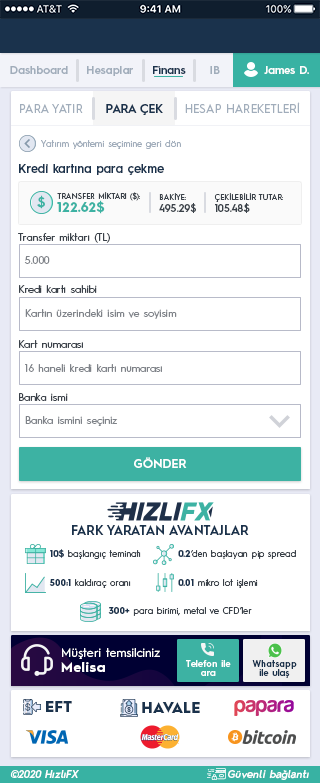
<style>
.page{position:relative;width:320px;height:783px;background:#ffffff}
.page>*{position:absolute;margin:0}
.t1{font:11.1px "HurmeGeometricSans3-SemiBold";color:#a1adbb}
.t2{font:11.1px "HurmeGeometricSans3-SemiBold";color:#1a324c}
.t3{font:11.1px "HurmeGeometricSans3-SemiBold";color:#fefefe}
.t4{font:11.9px "HurmeGeometricSans1-Regular";color:#a1adbb}
.t5{font:11.9px "HurmeGeometricSans1-SemiBold";color:#1a324c}
.t6{font:9px "HurmeGeometricSans1-Regular";letter-spacing:0.01em;color:#a1adbb}
.t7{font:11.9px "HurmeGeometricSans3-SemiBold";letter-spacing:0.01em;color:#1a324c}
.t8{font:13.4px "HurmeGeometricSans2-SemiBold";letter-spacing:0.01em;color:#3db2a3}
.t9{font:7.7px "HurmeGeometricSans1-Regular";letter-spacing:0.01em;color:#3a4149}
.t10{font:10.2px "HurmeGeometricSans1-SemiBold";letter-spacing:0.01em;color:#3a4149}
.t11{font:13.7px "HurmeGeometricSans1-Bold";letter-spacing:0.01em;color:#3db2a3}
.t12{font:10.2px "HurmeGeometricSans1-Regular";letter-spacing:0.01em;color:#3a4149}
.t13{font:10.2px "HurmeGeometricSans1-Regular";letter-spacing:0.01em;color:#7f8389}
.t14{font:11.9px "HurmeGeometricSans1-SemiBold";letter-spacing:0.025em;color:#ffffff}
.t15{font:12.8px "HurmeGeometricSans1-SemiBold";color:#1a324c}
.t16{font:9px "HurmeGeometricSans1-Regular";color:#3a4149}
.t17{font:9px "HurmeGeometricSans1-Bold";color:#1a324c}
.t18{font:11.9px/15.4px "HurmeGeometricSans1-Regular";letter-spacing:0.025em;color:#ffffff}
.t19{font:13.7px/15.4px "HurmeGeometricSans1-Bold";letter-spacing:0.05em;color:#ffffff}
.t20{font:8.9px/8.9px "HurmeGeometricSans3-SemiBold";letter-spacing:0.01em;color:#ffffff}
.t21{font:8.9px/8.9px "HurmeGeometricSans3-SemiBold";letter-spacing:0.01em;color:#1a324c}
.t22{font:14.5px "HurmeGeometricSans1-Black";letter-spacing:0.025em;color:#1a324c}
.t23{font:10.2px "HurmeGeometricSans2-SemiBoldObl";letter-spacing:0.025em;color:#ffffff}
</style>
<div class="page">
<p class="t1" style="left:10px;top:66px;width:58px;height:8px">Dashboard</p>
<p class="t1" style="left:87px;top:66px;width:46px;height:10px">Hesaplar</p>
<p class="t2" style="left:153px;top:66px;width:33px;height:8px">Finans</p>
<p class="t1" style="left:210px;top:66px;width:10px;height:8px">IB</p>
<p class="t3" style="left:264px;top:66px;width:45px;height:8px">James D.</p>
<p class="t4" style="left:185px;top:102px;width:115px;height:11px">HESAP HAREKETLERİ</p>
<p class="t4" style="left:20px;top:104px;width:63px;height:9px">PARA YATIR</p>
<p class="t5" style="left:106px;top:104px;width:57px;height:11px">PARA ÇEK</p>
<p class="t6" style="left:41px;top:140px;width:140px;height:9px">Yatırım yöntemi seçimine geri dön</p>
<p class="t7" style="left:19px;top:164px;width:145px;height:11px">Kredi kartına para çekme</p>
<p class="t8" style="left:37px;top:195px;width:8px;height:14px">$</p>
<p class="t9" style="left:57px;top:192px;width:83px;height:9px">TRANSFER MİKTARI ($):</p>
<p class="t9" style="left:159px;top:193px;width:37px;height:20px">BAKİYE:<br><span class="t10">495.29$</span></p>
<p class="t9" style="left:214px;top:193px;width:69px;height:20px">ÇEKİLEBİLİR TUTAR:<br><span class="t10">105.48$</span></p>
<p class="t11" style="left:57px;top:200px;width:48px;height:14px">122.62$</p>
<p class="t12" style="left:18px;top:233px;width:92px;height:10px">Transfer miktarı (TL)</p>
<p class="t13" style="left:24px;top:256px;width:26px;height:8px">5.000</p>
<p class="t12" style="left:19px;top:285px;width:78px;height:8px">Kredi kartı sahibi</p>
<p class="t13" style="left:25px;top:309px;width:152px;height:10px">Kartın üzerindeki isim ve soyisim</p>
<p class="t12" style="left:19px;top:340px;width:64px;height:8px">Kart numarası</p>
<p class="t13" style="left:25px;top:364px;width:137px;height:8px">16 haneli kredi kartı numarası</p>
<p class="t12" style="left:19px;top:393px;width:49px;height:8px">Banka ismi</p>
<p class="t13" style="left:25px;top:416px;width:93px;height:10px">Banka ismini seçiniz</p>
<p class="t14" style="left:134px;top:457px;width:53px;height:11px">GÖNDER</p>
<p class="t15" style="left:72px;top:525px;width:177px;height:10px">FARK YARATAN AVANTAJLAR</p>
<p class="t16" style="left:50px;top:549px;width:91px;height:10px"><span class="t17">10$</span> başlangıç teminatı</p>
<p class="t16" style="left:178px;top:550px;width:118px;height:9px"><span class="t17">0.2</span>‘den başlayan pip spread</p>
<p class="t16" style="left:49px;top:579px;width:82px;height:9px"><span class="t17">500:1</span> kaldıraç oranı</p>
<p class="t16" style="left:178px;top:579px;width:80px;height:9px"><span class="t17">0.01</span> mikro lot işlemi</p>
<p class="t16" style="left:108px;top:607px;width:144px;height:9px"><span class="t17">300+</span> para birimi, metal ve CFD’ler</p>
<p class="t18" style="left:61px;top:648px;width:99px;height:24px">Müşteri temsilciniz<br><span class="t19">Melisa</span></p>
<p class="t20" style="left:186px;top:660px;width:45px;height:16px;text-align:center">Telefon ile<br>ara</p>
<p class="t21" style="left:252px;top:660px;width:45px;height:18px;text-align:center">Whatsapp<br>ile ulaş</p>
<p class="t22" style="left:46px;top:701px;width:26px;height:11px">EFT</p>
<p class="t22" style="left:142px;top:702px;width:58px;height:11px">HAVALE</p>
<p class="t23" style="left:10px;top:770px;width:69px;height:8px">©2020 HızlıFX</p>
<p class="t23" style="left:228px;top:770px;width:81px;height:10px">Güvenli bağlantı</p>
</div>
